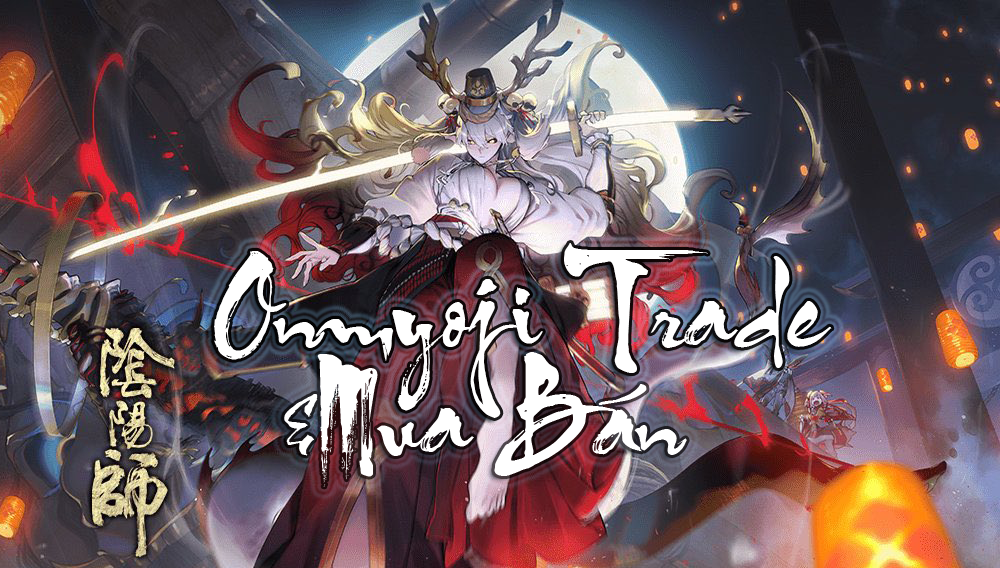
<style>
.page{position:relative;width:1000px;height:568px}
.page>*{position:absolute;margin:0}
.t1{font:100px "HLThuphap";color:#ffffff}
</style>
<div class="page">
<p class="t1" style="left:214px;top:243px;width:618px;height:175px;text-align:center">Onmyoji Trade</p>
<p class="t1" style="left:214px;top:243px;width:618px;height:175px;text-align:center">Onmyoji Trade</p>
<p class="t1" style="left:284px;top:352px;width:403px;height:135px">&amp;Mua Bán</p>
</div>
